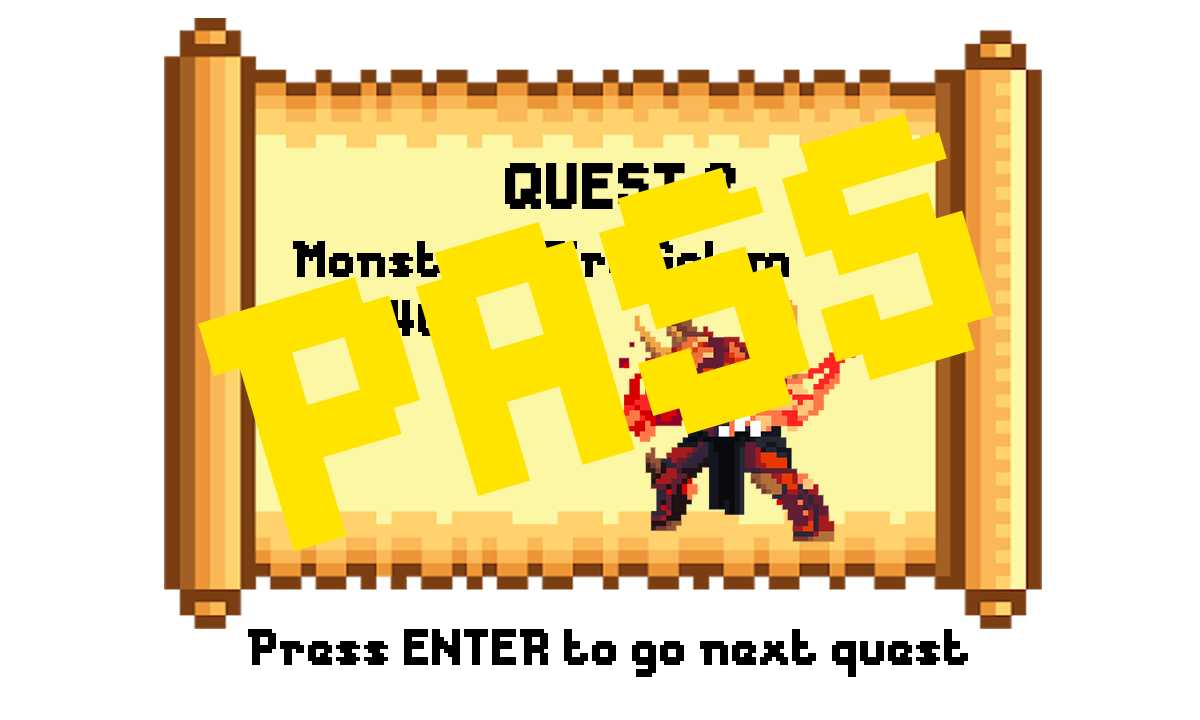
<style>
.page{position:relative;width:1200px;height:720px;background:#ffffff}
.page>*{position:absolute;margin:0}
.t1{font:327.3px "Messe-Duesseldorf";color:#ffe400}
.t2{font:61.3px "Messe-Duesseldorf";color:#000000}
.t3{font:48px "Messe-Duesseldorf"}
.t4{font:48px "Messe-Duesseldorf";color:#ffe400}
.t5{font:48px "Messe-Duesseldorf";color:#000000}
</style>
<div class="page">
<p class="t1" style="left:198px;top:113px;width:796px;height:439px;rotate:-17deg">PASS</p>
<p class="t2" style="left:505px;top:163px;width:231px;height:46px">QUEST 2</p>
<p class="t3" style="left:293px;top:241px;width:496px;height:36px">Monster : Fire Golem</p>
<p class="t4" style="left:294px;top:300px;width:148px;height:36px">HP : 40</p>
<p class="t5" style="left:248px;top:629px;width:720px;height:48px">Press ENTER to go next quest</p>
</div>
